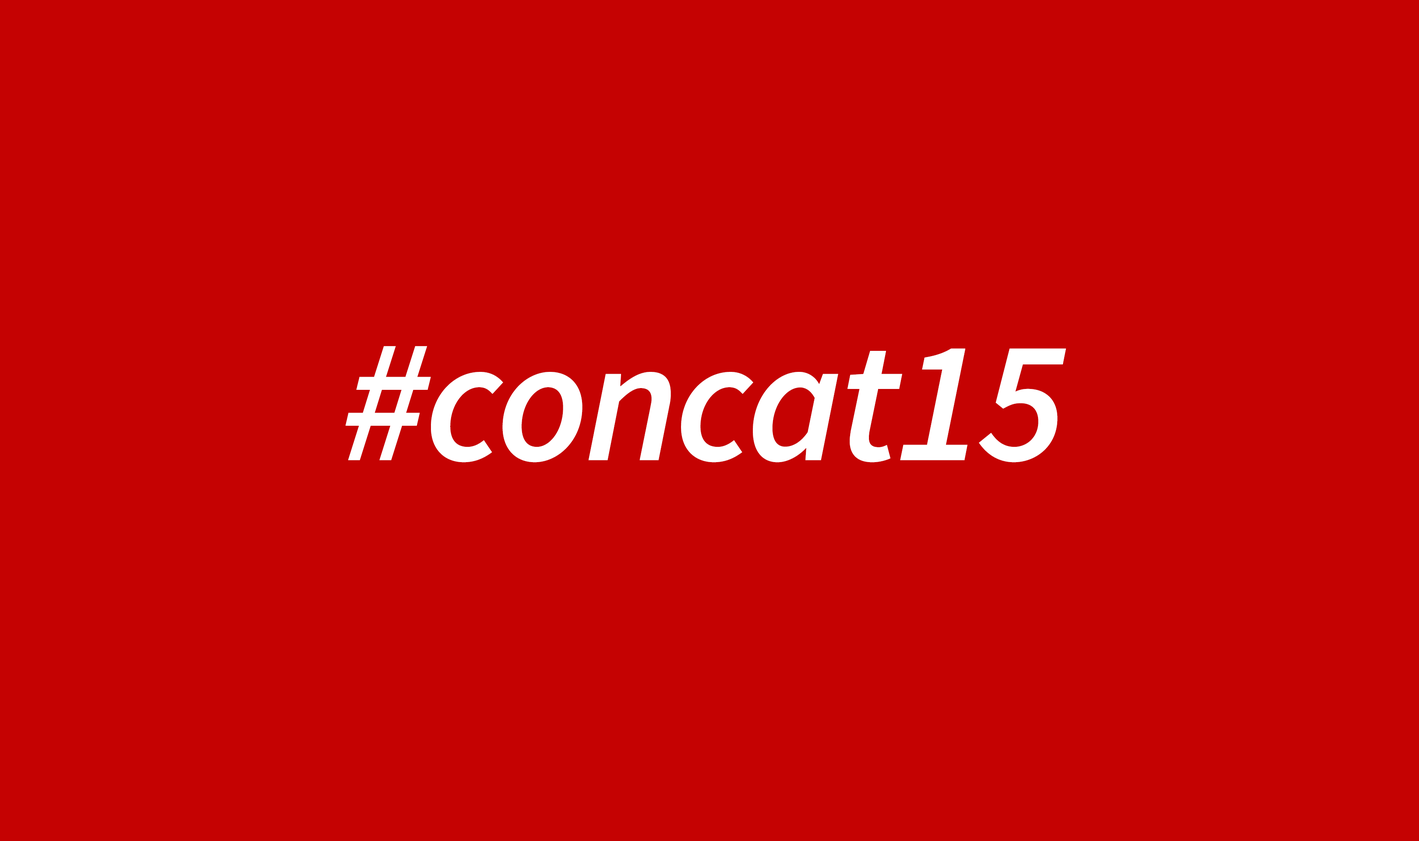
<style>
.page{position:relative;width:1419px;height:841px;background:#c50202}
.page>*{position:absolute;margin:0}
.t1{font:175.1px "SourceSansPro-SemiboldIt";color:#ffffff}
</style>
<div class="page">
<p class="t1" style="left:345px;top:346px;width:721px;height:116px">#concat15</p>
</div>
